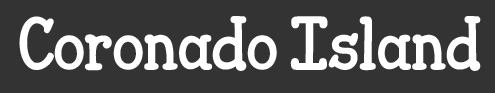
<style>
.page{position:relative;width:495px;height:93px;background:#333333}
.page>*{position:absolute;margin:0}
.t1{font:58.3px "JandaCloserToFree";color:#ffffff}
</style>
<div class="page">
<p class="t1" style="left:19px;top:16px;width:462px;height:55px">Coronado Island</p>
</div>
